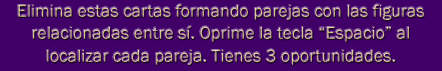
<style>
.page{position:relative;width:442px;height:71px;background:#400068}
.page>*{position:absolute;margin:0}
.t1{font:18px/22.2px "FranklinGothic-Book";color:#d4c088}
</style>
<div class="page">
<p class="t1" style="left:18px;top:4px;width:407px;height:61px;text-align:center">Elimina estas cartas formando parejas con las figuras <br>relacionadas entre sí. Oprime la tecla “Espacio” al <br>localizar cada pareja. Tienes 3 oportunidades.</p>
</div>
